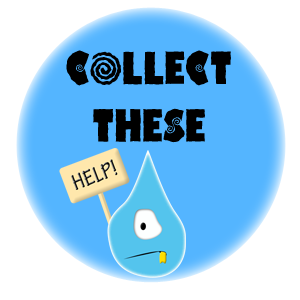
<style>
.page{position:relative;width:300px;height:300px;background:#ffffff}
.page>*{position:absolute;margin:0}
.t1{font:48px "HippoCritic";color:#000000}
</style>
<div class="page">
<p class="t1" style="left:66px;top:50px;width:165px;height:93px;text-align:center">COLLECT<br>THESE</p>
</div>
